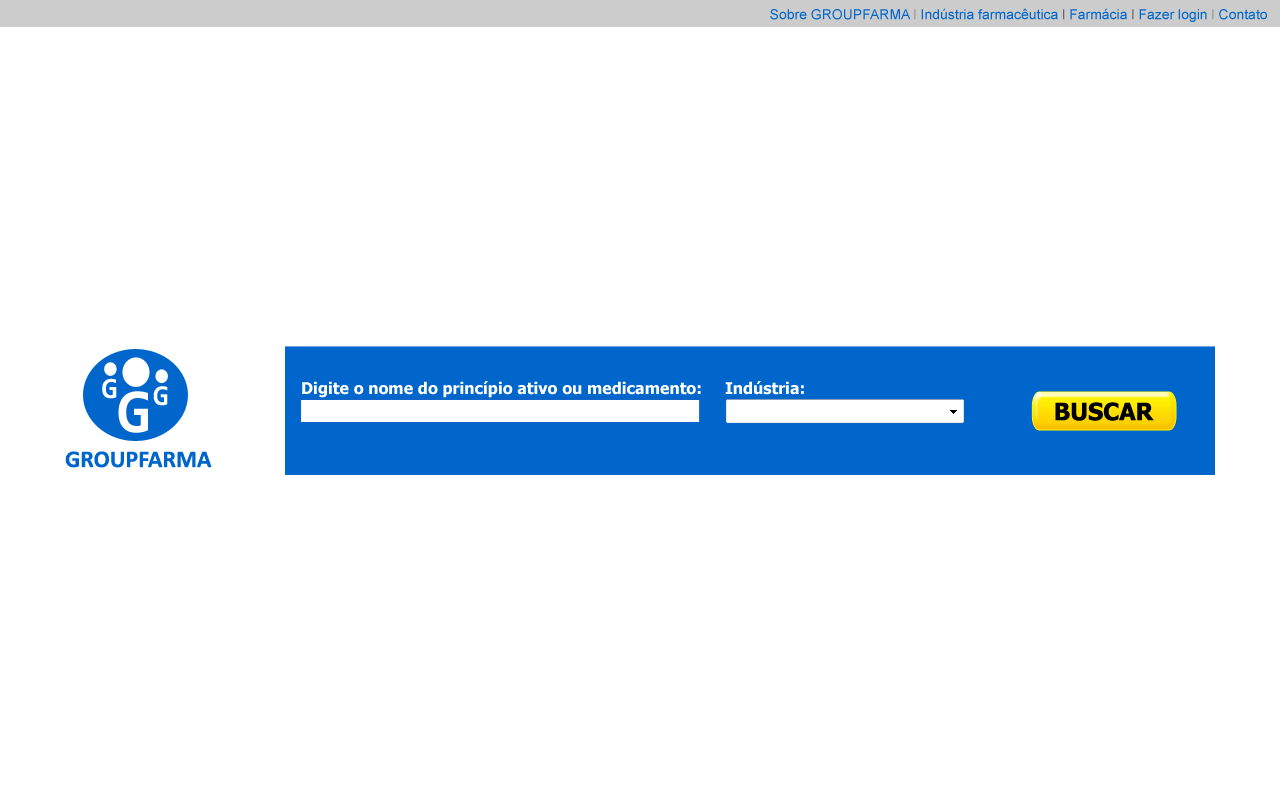
<style>
.page{position:relative;width:1280px;height:800px;background:#ffffff}
.page>*{position:absolute;margin:0}
.t1{font:14px "ArialMT";color:#0066cc}
.t2{font:14px "ArialMT";color:#999999}
.t3{font:14px "ArialMT";color:#666666}
.t4{font:29.6px "Consolas-Bold";color:#ffffff}
.t5{font:28.9px "Consolas-Bold";color:#ffffff}
.t6{font:16px "Tahoma-Bold";color:#ffffff}
.t7{font:62.5px "Consolas-Bold";color:#ffffff}
.t8{font:24px "Tahoma-Bold";color:#000000}
.t9{font:24px "Calibri-Bold";color:#0066cc}
</style>
<div class="page">
<p class="t1" style="left:770px;top:8px;width:497px;height:14px">Sobre GROUPFARMA <span class="t2">l </span>Indústria farmacêutica <span class="t3">l </span>Farmácia <span class="t3">l </span>Fazer login <span class="t2">l </span>Contato</p>
<p class="t4" style="left:102px;top:378px;width:15px;height:21px">G</p>
<p class="t5" style="left:153px;top:386px;width:15px;height:20px">G</p>
<p class="t6" style="left:302px;top:381px;width:399px;height:17px">Digite o nome do princípio ativo ou medicamento:</p>
<p class="t6" style="left:725px;top:381px;width:79px;height:14px">Indústria:</p>
<p class="t7" style="left:118px;top:391px;width:30px;height:42px">G</p>
<p class="t8" style="left:1055px;top:402px;width:99px;height:19px">BUSCAR</p>
<p class="t9" style="left:65px;top:451px;width:147px;height:17px">GROUPFARMA</p>
</div>
